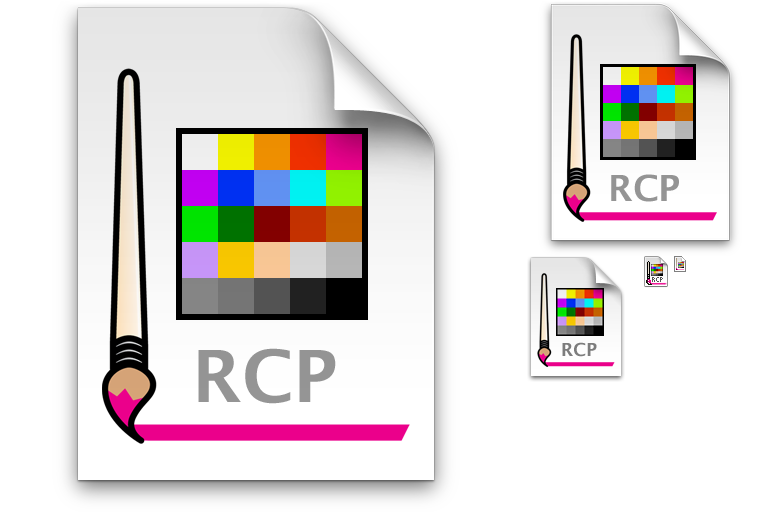
<style>
.page{position:relative;width:768px;height:512px;background:#ffffff}
.page>*{position:absolute;margin:0}
.t1{font:36px "LucidaGrande-Bold";color:#959595}
.t2{font:7px "KKFixed4x7";color:#555555}
.t3{font:18px "LucidaGrande-Bold";color:#7d7d7d}
.t4{font:72px "LucidaGrande-Bold";color:#959595}
</style>
<div class="page">
<p class="t1" style="left:611px;top:174px;width:68px;height:28px">RCP</p>
<p class="t2" style="left:652px;top:277px;width:11px;height:5px">RCP</p>
<p class="t3" style="left:562px;top:342px;width:35px;height:15px">RCP</p>
<p class="t4" style="left:198px;top:348px;width:138px;height:56px">RCP</p>
</div>
